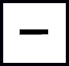
<style>
.page{position:relative;width:69px;height:66px;background:#ffffff}
.page>*{position:absolute;margin:0}
.t1{font:81.1px "Lora-Regular";color:#000000}
</style>
<div class="page">
<p class="t1" style="left:19px;top:29px;width:30px;height:6px">-</p>
</div>
